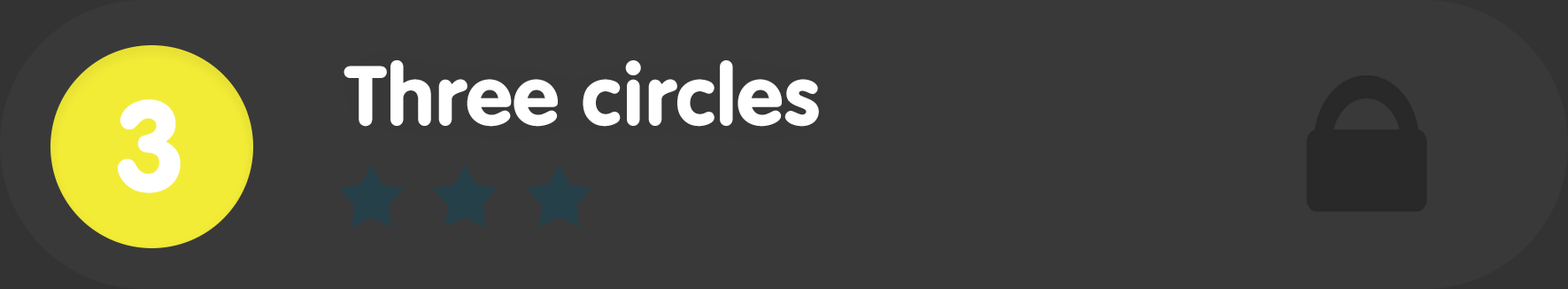
<style>
.page{position:relative;width:1568px;height:289px;background:#393939}
.page>*{position:absolute;margin:0}
.t1{font:88.5px "VAGRundschriftD";color:#ffffff}
.t2{font:132.8px "VAGRundschriftD";color:#ffffff}
</style>
<div class="page">
<p class="t1" style="left:344px;top:59px;width:475px;height:68px">Three circles</p>
<p class="t2" style="left:118px;top:99px;width:63px;height:94px">3</p>
</div>
